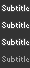
<style>
.page{position:relative;width:30px;height:68px;background:#333333}
.page>*{position:absolute;margin:0}
.t1{font:8px "Small Fonts";letter-spacing:0.005em;color:#ffffff}
.t2{font:8px "Small Fonts";letter-spacing:0.005em;color:#a7a7a7}
</style>
<div class="page">
<p class="t1" style="left:2px;top:5px;width:27px;height:6px">Subtitle</p>
<p class="t1" style="left:2px;top:22px;width:27px;height:6px">Subtitle</p>
<p class="t1" style="left:2px;top:39px;width:27px;height:6px">Subtitle</p>
<p class="t2" style="left:2px;top:56px;width:27px;height:6px">Subtitle</p>
</div>
